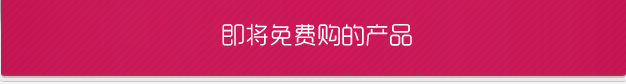
<style>
.page{position:relative;width:626px;height:84px}
.page>*{position:absolute;margin:0}
.t1{font:24px "RTWSYueRoudGoDemo-Regular";color:#fbfafa}
</style>
<div class="page">
<p class="t1" style="left:222px;top:23px;width:190px;height:23px">即将免费购的产品</p>
</div>
